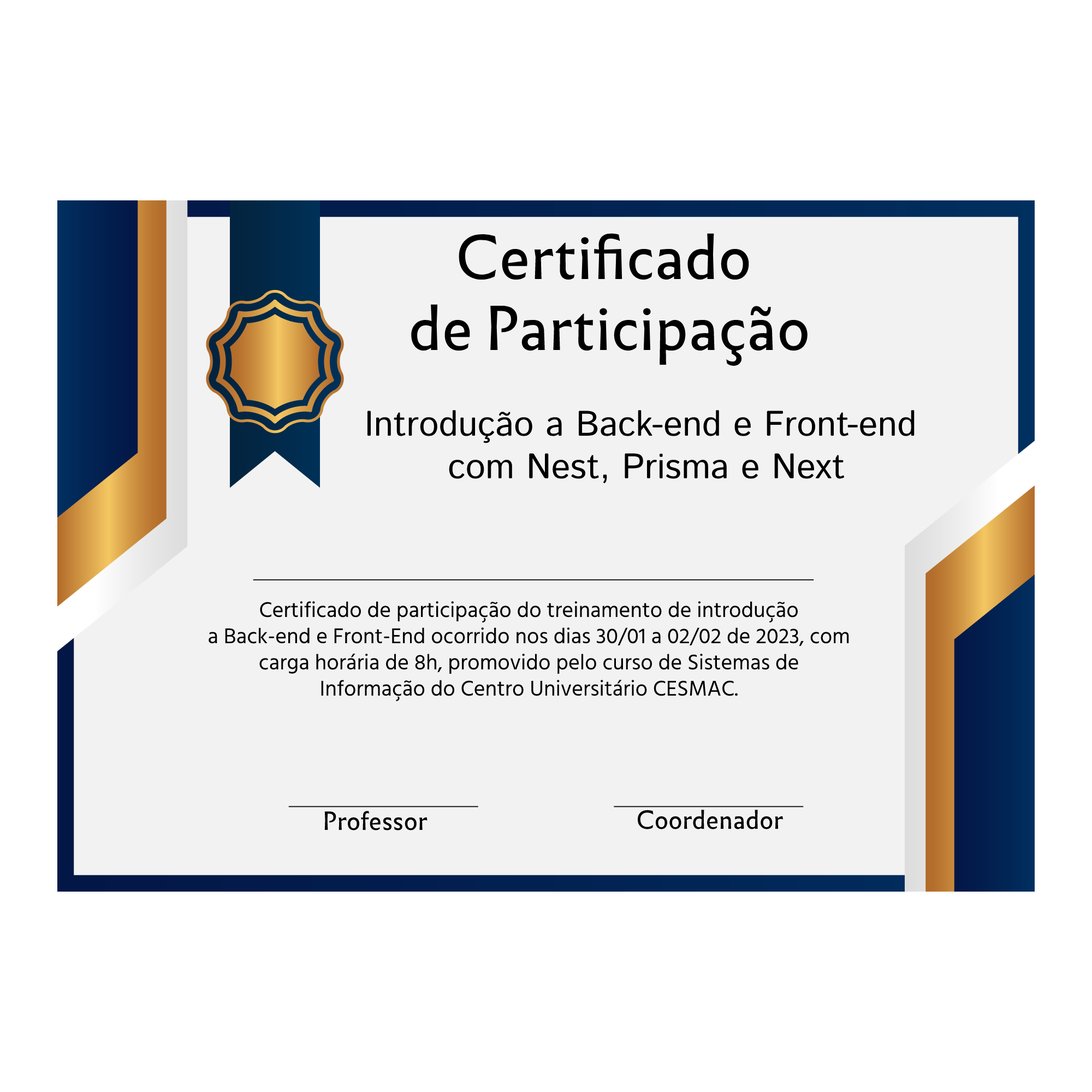
<style>
.page{position:relative;width:1092px;height:1092px;background:#ffffff}
.page>*{position:absolute;margin:0}
.t1{font:59px "Infini-Regular";color:#000000}
.t2{font:35.5px "IstokWeb-Regular";color:#000000}
.t3{font:21.8px "HindGuntur-Regular";color:#000000}
.t4{font:24.6px "Infini-Regular";color:#000000}
</style>
<div class="page">
<p class="t1" style="left:411px;top:233px;width:397px;height:133px;text-align:center">Certificado <br>de Participação</p>
<p class="t2" style="left:367px;top:410px;width:548px;height:74px;text-align:center">Introdução a Back-end e Front-end <br>com Nest, Prisma e Next</p>
<p class="t3" style="left:209px;top:601px;width:640px;height:101px;text-align:center">Certificado de participação do treinamento de introdução<br>a Back-end e Front-End ocorrido nos dias 30/01 a 02/02 de 2023, com<br>carga horária de 8h, promovido pelo curso de Sistemas de<br>Informação do Centro Universitário CESMAC.</p>
<p class="t4" style="left:637px;top:810px;width:146px;height:19px">Coordenador</p>
<p class="t4" style="left:324px;top:811px;width:104px;height:19px">Professor</p>
</div>
